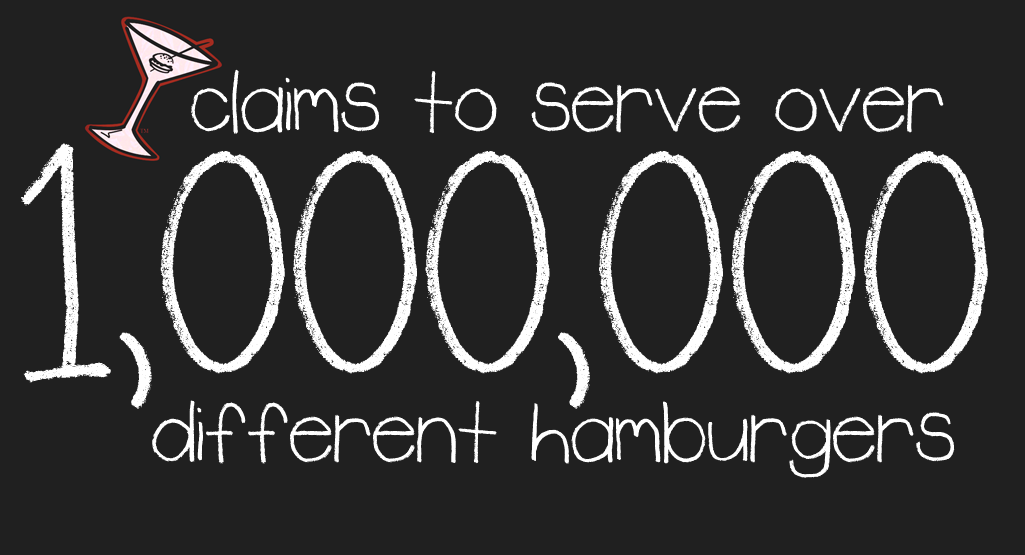
<style>
.page{position:relative;width:1025px;height:555px;background:#202020}
.page>*{position:absolute;margin:0}
.t1{font:100px "Rudiment";color:#ffffff}
.t2{font:300px "Rudiment";color:#ffffff}
</style>
<div class="page">
<p class="t1" style="left:191px;top:69px;width:753px;height:65px">claims to serve over</p>
<p class="t2" style="left:21px;top:143px;width:967px;height:266px">1,000,000</p>
<p class="t1" style="left:152px;top:400px;width:803px;height:78px">different hamburgers</p>
</div>
